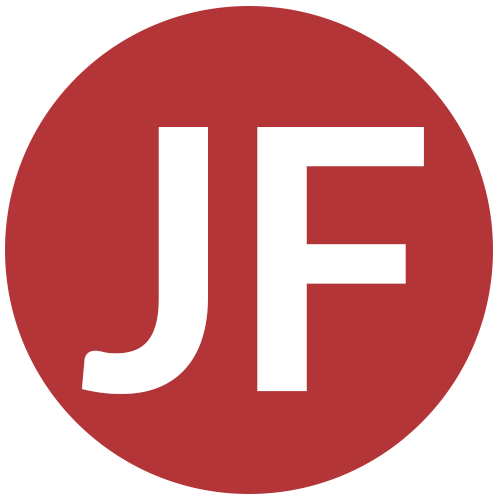
<style>
.page{position:relative;width:500px;height:500px;background:#b33538}
.page>*{position:absolute;margin:0}
.t1{font:365px "Lato-Bold";letter-spacing:-0.02em;color:#ffffff}
</style>
<div class="page">
<p class="t1" style="left:82px;top:127px;width:342px;height:267px">JF</p>
</div>
